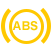
<style>
.page{position:relative;width:51px;height:51px;background:#ffffff}
.page>*{position:absolute;margin:0}
.t1{font:12px "Arial-BoldMT";color:#facd01}
</style>
<div class="page">
<p class="t1" style="left:12px;top:21px;width:26px;height:10px">ABS</p>
</div>
